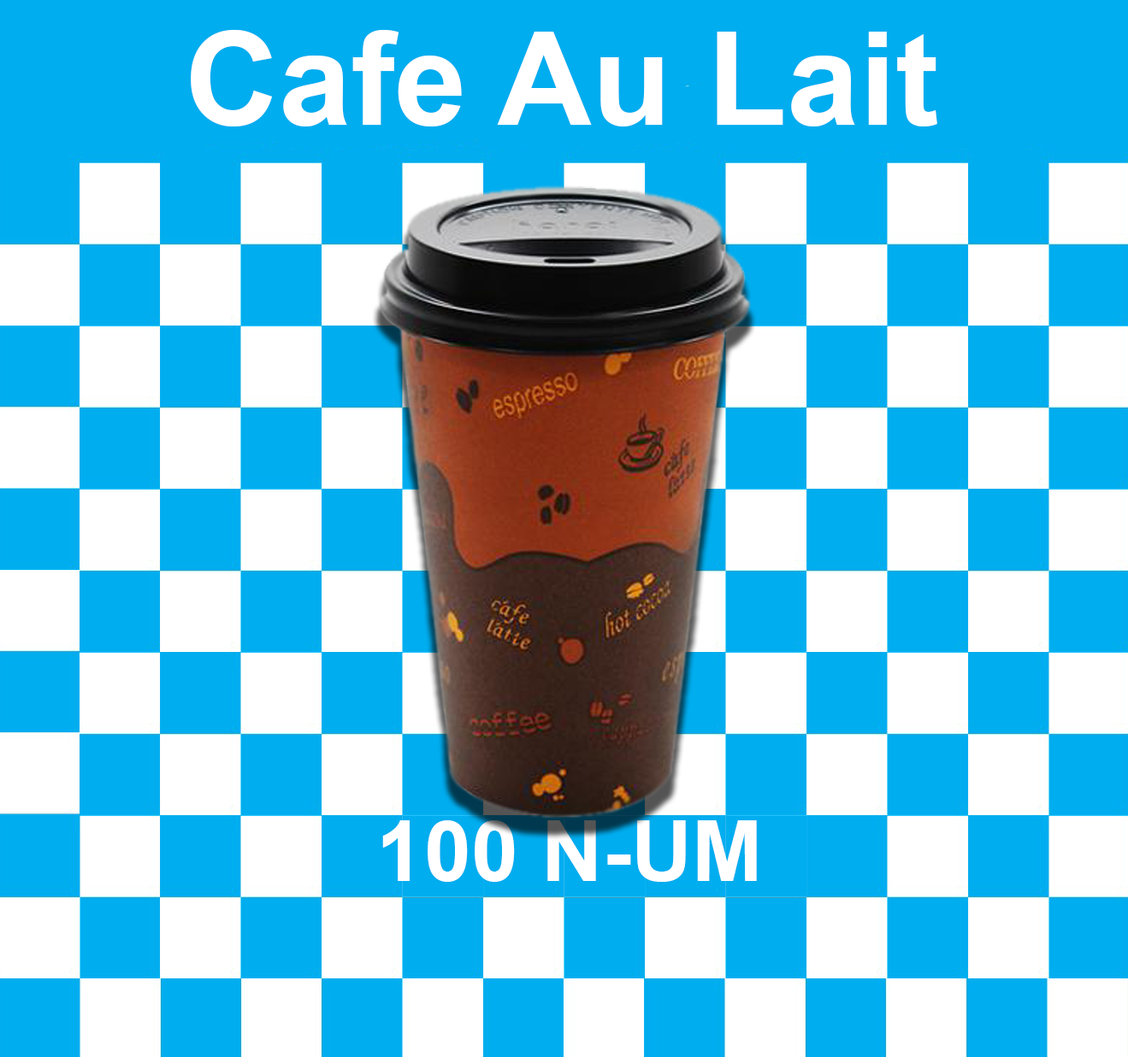
<style>
.page{position:relative;width:1128px;height:1057px;background:#00adef}
.page>*{position:absolute;margin:0}
.t1{font:129.9px "Arial-BoldMT";color:#ffffff}
.t2{font:84.6px "Arial-BoldMT";color:#ffffff}
</style>
<div class="page">
<p class="t1" style="left:191px;top:30px;width:746px;height:97px">Cafe Au Lait</p>
<p class="t2" style="left:382px;top:821px;width:375px;height:61px">100 N-UM</p>
</div>
